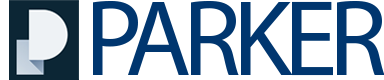
<style>
.page{position:relative;width:384px;height:80px;background:#ffffff}
.page>*{position:absolute;margin:0}
.t1{font:108px "MyriadPro-Regular";letter-spacing:-0.075em;color:#00366f;text-transform:uppercase}
</style>
<div class="page">
<p class="t1" style="left:93px;top:1px;width:292px;height:75px">PARKER</p>
</div>
